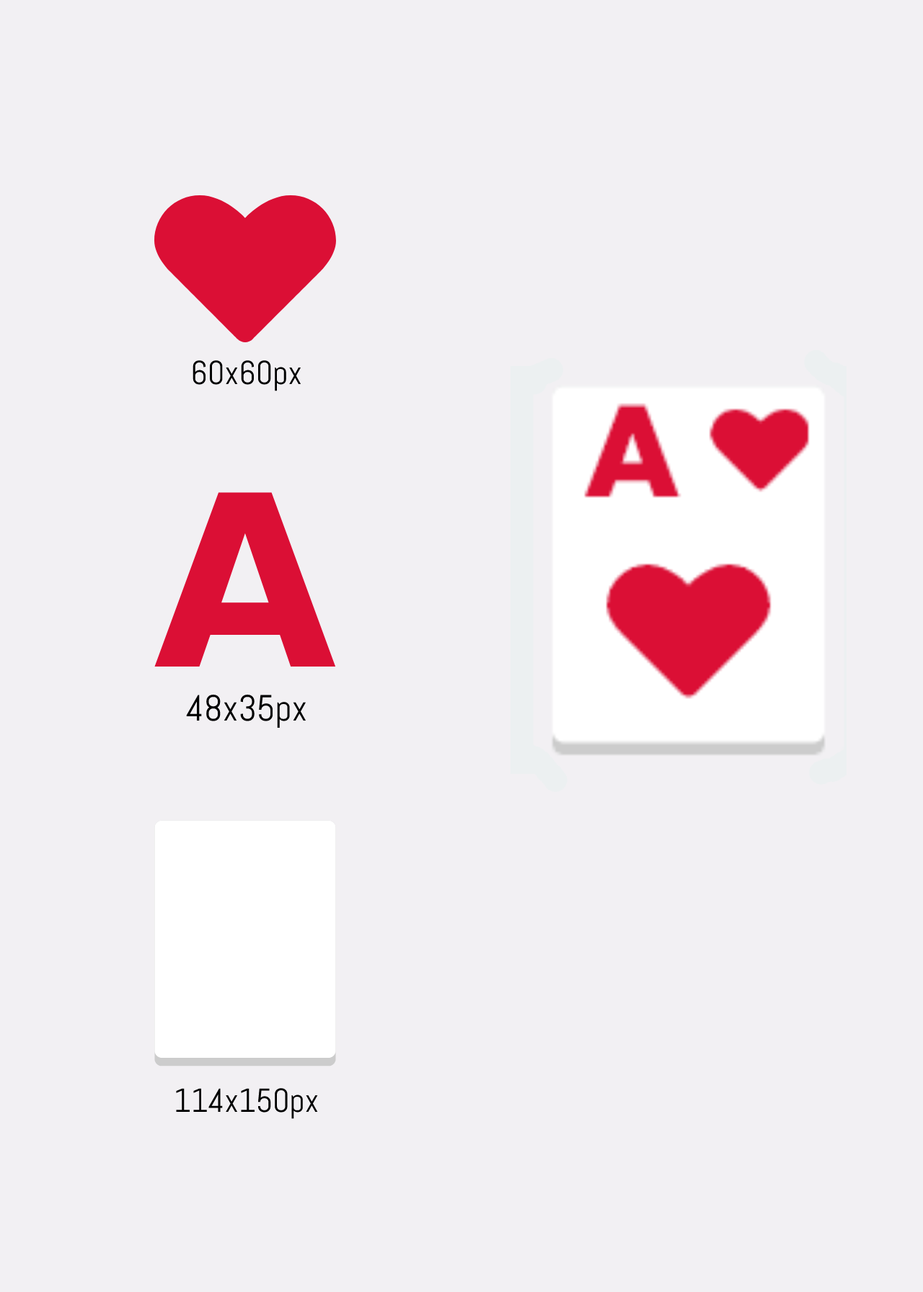
<style>
.page{position:relative;width:923px;height:1292px;background:#f2f0f3}
.page>*{position:absolute;margin:0}
.t1{font:33.2px "Abel-Regular";color:#000000}
.t2{font:238.9px "Aharoni-Bold";color:#db0f35}
.t3{font:36.4px "Abel-Regular";color:#000000}
</style>
<div class="page">
<p class="t1" style="left:192px;top:360px;width:109px;height:31px">60x60px</p>
<p class="t2" style="left:154px;top:492px;width:182px;height:175px">A</p>
<p class="t3" style="left:186px;top:695px;width:120px;height:34px">48x35px</p>
<p class="t1" style="left:176px;top:1088px;width:142px;height:31px">114x150px</p>
</div>
